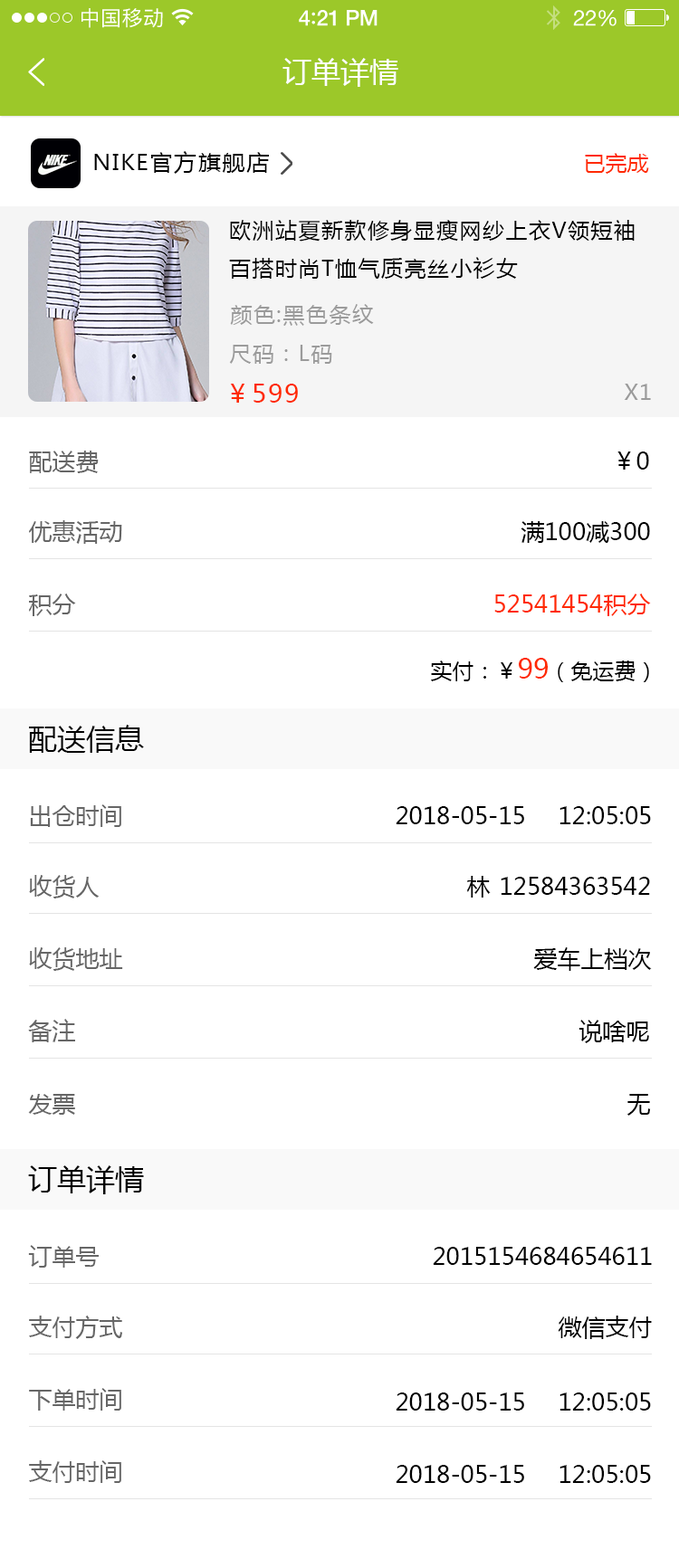
<style>
.page{position:relative;width:679px;height:1568px;background:#ffffff}
.page>*{position:absolute;margin:0}
.t1{font:20.8px "PingFangSC-Regular";letter-spacing:0.02em;color:#ffffff}
.t2{font:21.7px "HelveticaNeue-Medium";letter-spacing:-0.02em;color:#ffffff}
.t3{font:23.5px "Avenir-Medium";letter-spacing:-0.02em;color:#ffffff}
.t4{font:21.7px "HelveticaNeue";letter-spacing:-0.02em;color:#ffffff}
.t5{font:29px "MicrosoftYaHei";color:#ffffff;text-transform:uppercase}
.t6{font:21.7px "MicrosoftYaHei";letter-spacing:0.05em;color:#000000;scale:1.06 1}
.t7{font:21.7px "MicrosoftYaHei";color:#ff2a00;text-transform:uppercase}
.t8{font:21.7px "MicrosoftYaHei";letter-spacing:0.06em;color:#000000;text-transform:uppercase}
.t9{font:21.7px "MicrosoftYaHei";letter-spacing:0.06em;color:#9b9b9b;text-transform:uppercase}
.t10{font:25.3px "MicrosoftYaHei";letter-spacing:0.06em;color:#ff2a00;text-transform:uppercase}
.t11{font:23.5px "MicrosoftYaHei";color:#666666;text-transform:uppercase}
.t12{font:23.5px "MicrosoftYaHei";color:#000000;text-transform:uppercase}
.t13{font:23.5px "MicrosoftYaHei";color:#ff2a00;text-transform:uppercase}
.t14{font:21.7px "MicrosoftYaHei";color:#000000;text-transform:uppercase}
.t15{font:27.1px "MicrosoftYaHei";color:#ff2a00;text-transform:uppercase}
.t16{font:29px "MicrosoftYaHei";color:#000000;text-transform:uppercase}
</style>
<div class="page">
<p class="t1" style="left:81px;top:8px;width:82px;height:20px">中国移动</p>
<p class="t2" style="left:299px;top:10px;width:78px;height:16px">4<span class="t3">:</span>21 PM</p>
<p class="t4" style="left:573px;top:10px;width:43px;height:16px">22%</p>
<p class="t5" style="left:282px;top:58px;width:116px;height:29px">订单详情</p>
<p class="t6" style="left:94px;top:151px;width:175px;height:23px">NIKE官方旗舰店</p>
<p class="t7" style="left:584px;top:153px;width:65px;height:21px">已完成</p>
<p class="t8" style="left:229px;top:220px;width:405px;height:59px">欧洲站夏新款修身显瘦网纱上衣v领短袖百搭时尚t恤气质亮丝小衫女</p>
<p class="t9" style="left:230px;top:304px;width:144px;height:22px">颜色:黑色条纹</p>
<p class="t9" style="left:229px;top:345px;width:103px;height:19px">尺码：L码</p>
<p class="t10" style="left:230px;top:384px;width:68px;height:19px">￥599</p>
<p class="t9" style="left:623px;top:384px;width:28px;height:16px">x1</p>
<p class="t11" style="left:29px;top:451px;width:70px;height:22px">配送费</p>
<p class="t12" style="left:617px;top:451px;width:32px;height:19px">￥0</p>
<p class="t11" style="left:29px;top:520px;width:93px;height:24px">优惠活动</p>
<p class="t12" style="left:520px;top:521px;width:130px;height:22px">满100减300</p>
<p class="t11" style="left:29px;top:594px;width:47px;height:22px">积分</p>
<p class="t13" style="left:494px;top:594px;width:157px;height:22px">52541454积分</p>
<p class="t14" style="left:431px;top:658px;width:218px;height:24px">实付：￥<span class="t15">99</span>（免运费）</p>
<p class="t16" style="left:29px;top:725px;width:115px;height:28px">配送信息</p>
<p class="t11" style="left:30px;top:804px;width:91px;height:23px">出仓时间</p>
<p class="t12" style="left:395px;top:806px;width:256px;height:18px">2018-05-15 12:05:05</p>
<p class="t11" style="left:29px;top:875px;width:71px;height:23px">收货人</p>
<p class="t12" style="left:467px;top:876px;width:183px;height:22px">林 12584363542</p>
<p class="t11" style="left:29px;top:947px;width:94px;height:24px">收货地址</p>
<p class="t12" style="left:533px;top:947px;width:118px;height:24px">爱车上档次</p>
<p class="t11" style="left:28px;top:1019px;width:47px;height:23px">备注</p>
<p class="t12" style="left:578px;top:1020px;width:71px;height:23px">说啥呢</p>
<p class="t11" style="left:28px;top:1094px;width:47px;height:21px">发票</p>
<p class="t12" style="left:626px;top:1094px;width:25px;height:22px">无</p>
<p class="t16" style="left:28px;top:1165px;width:116px;height:29px">订单详情</p>
<p class="t11" style="left:28px;top:1245px;width:71px;height:23px">订单号</p>
<p class="t12" style="left:432px;top:1247px;width:219px;height:18px">2015154684654611</p>
<p class="t11" style="left:29px;top:1316px;width:94px;height:23px">支付方式</p>
<p class="t12" style="left:557px;top:1316px;width:94px;height:23px">微信支付</p>
<p class="t11" style="left:29px;top:1388px;width:92px;height:23px">下单时间</p>
<p class="t12" style="left:395px;top:1392px;width:256px;height:19px">2018-05-15 12:05:05</p>
<p class="t11" style="left:29px;top:1460px;width:92px;height:23px">支付时间</p>
<p class="t12" style="left:395px;top:1465px;width:256px;height:18px">2018-05-15 12:05:05</p>
</div>
